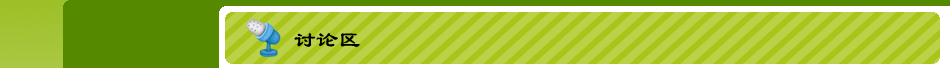
<style>
.page{position:relative;width:950px;height:68px;background:#bad148}
.page>*{position:absolute;margin:0}
.t1{font:22px "LiSu";color:#000000}
</style>
<div class="page">
<p class="t1" style="left:294px;top:33px;width:66px;height:14px">讨论区</p>
</div>
